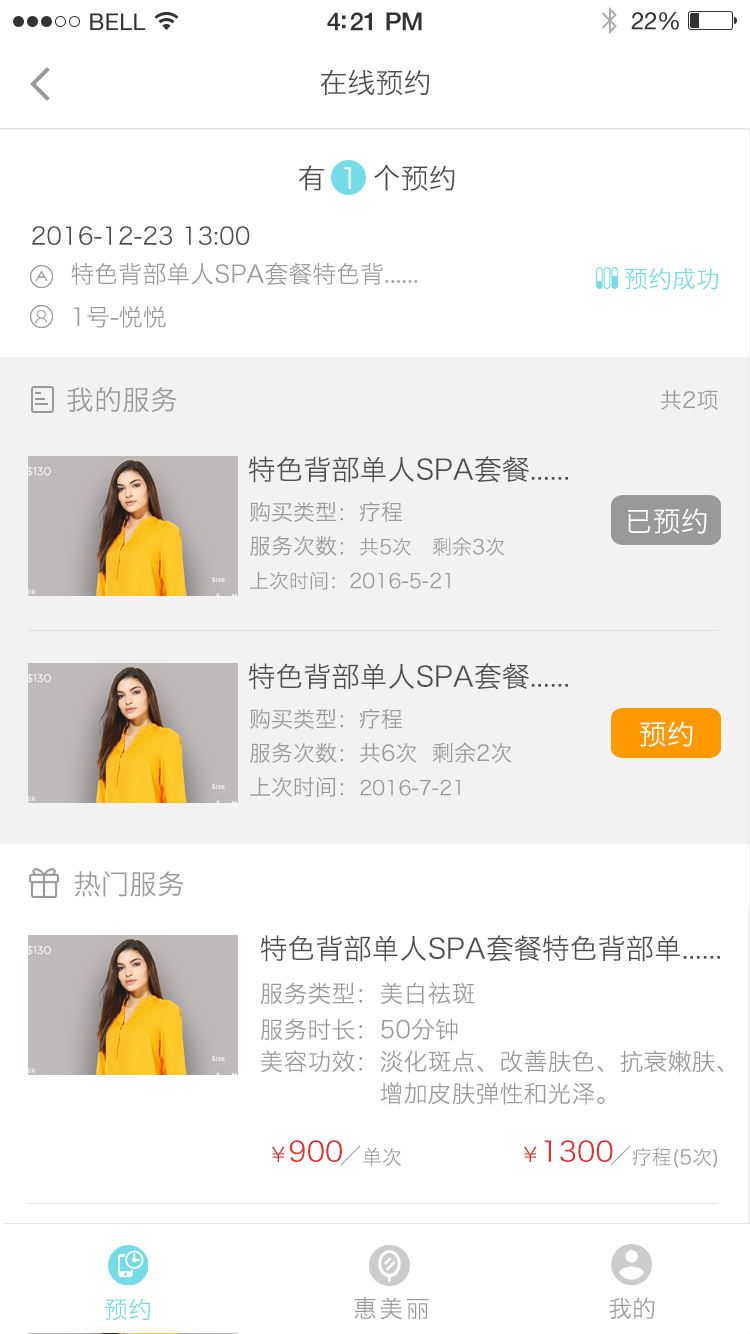
<style>
.page{position:relative;width:750px;height:1334px;background:#ffffff}
.page>*{position:absolute;margin:0}
.t1{font:28px "HiraginoSansGB-W3";color:#4d4d4d}
.t2{font:28px "HiraginoSansGB-W3";color:#4c4c4c}
.t3{font:28px "HiraginoSansGB-W3";color:#ffffff}
.t4{font:24px/38px "HiraginoSansGB-W3";color:#999999}
.t5{font:24px/43px "HiraginoSansGB-W3";color:#4c4c4c}
.t6{font:24px/43px "HiraginoSansGB-W3";color:#999999}
.t7{font:24px "HiraginoSansGB-W3";color:#73dce6}
.t8{font:28px "HiraginoSansGB-W3";color:#999999}
.t9{font:22px "HiraginoSansGB-W3";color:#999999}
.t10{font:20px/34px "HiraginoSansGB-W3";color:#999999}
.t11{font:22px/34px "HiraginoSansGB-W3";color:#999999}
.t12{font:24px/32px "HiraginoSansGB-W3";color:#999999}
.t13{font:24px/36px "HiraginoSansGB-W3";color:#999999}
.t14{font:28px "HiraginoSansGB-W3";color:#e42f2f}
.t15{font:20px "HiraginoSansGB-W3";color:#999999}
.t16{font:20px "HiraginoSansGB-W3";color:#e42f2f}
.t17{font:24px "HiraginoSansGB-W3";letter-spacing:0.1em;color:#999999}
.t18{font:24px "HiraginoSansGB-W3";color:#999999}
</style>
<div class="page">
<p class="t1" style="left:320px;top:69px;width:109px;height:27px">在线预约</p>
<p class="t2" style="left:299px;top:164px;width:156px;height:27px">有     个预约</p>
<p class="t3" style="left:344px;top:167px;width:7px;height:22px">1</p>
<p class="t4" style="left:32px;top:226px;width:385px;height:102px;text-align:justify"><span class="t5">2016-12-23 13:00<br></span>     特色背部单人SPA套餐特色背......<br><span class="t6">     1号-悦悦</span></p>
<p class="t7" style="left:625px;top:268px;width:93px;height:22px">预约成功</p>
<p class="t8" style="left:67px;top:387px;width:110px;height:26px">我的服务</p>
<p class="t9" style="left:661px;top:390px;width:57px;height:20px">共2项</p>
<p class="t1" style="left:248px;top:456px;width:320px;height:27px">特色背部单人SPA套餐......</p>
<p class="t10" style="left:249px;top:501px;width:256px;height:89px;text-align:justify"><span class="t11">购买类型：疗程<br>服务次数：</span>共5次   剩余3次<br>上次时间：2016-5-21</p>
<p class="t3" style="left:628px;top:508px;width:79px;height:26px">已预约</p>
<p class="t1" style="left:248px;top:663px;width:320px;height:27px">特色背部单人SPA套餐......</p>
<p class="t11" style="left:249px;top:708px;width:263px;height:89px;text-align:justify">购买类型：疗程<br>服务次数：共6次  剩余2次<br>上次时间：<span class="t10">2016-7-21</span></p>
<p class="t3" style="left:640px;top:721px;width:53px;height:26px">预约</p>
<p class="t8" style="left:74px;top:871px;width:110px;height:26px">热门服务</p>
<p class="t1" style="left:260px;top:935px;width:460px;height:27px">特色背部单人SPA套餐特色背部单......</p>
<p class="t12" style="left:260px;top:982px;width:464px;height:123px;text-align:justify"><span class="t13">服务类型：美白祛斑<br>服务时长：50分钟<br></span>美容功效：淡化斑点、改善肤色、抗衰嫩肤、<br>               增加皮肤弹性和光泽。</p>
<p class="t14" style="left:271px;top:1140px;width:71px;height:22px"><span class="t15">                                        </span><span class="t16">￥</span>900</p>
<p class="t14" style="left:523px;top:1140px;width:90px;height:22px"><span class="t15">                                        </span><span class="t16">￥</span>1300</p>
<p class="t15" style="left:363px;top:1147px;width:38px;height:20px">单次</p>
<p class="t15" style="left:632px;top:1147px;width:85px;height:21px">疗程(5次)</p>
<p class="t7" style="left:105px;top:1298px;width:46px;height:23px">预约</p>
<p class="t17" style="left:354px;top:1297px;width:75px;height:23px">惠美丽</p>
<p class="t18" style="left:609px;top:1297px;width:46px;height:22px">我的</p>
</div>
